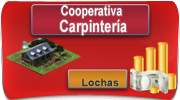
<style>
.page{position:relative;width:180px;height:100px}
.page>*{position:absolute;margin:0}
.t1{font:13.9px/16.7px "Arial-BoldMT";color:#ffffff;scale:0.77 1}
.t2{font:16.7px/16.7px "Arial-BoldMT";color:#ffffff;scale:0.77 1}
.t3{font:10.4px "Arial-BoldMT";color:#303030;scale:1.03 1}
.t4{font:20.8px "Arial-BoldMT";color:#303030;scale:1.03 1}
</style>
<div class="page">
<p class="t1" style="left:60px;top:5px;width:67px;height:31px">Cooperativa<br><span class="t2">        Carpintería</span></p>
<p class="t3" style="left:82px;top:78px;width:37px;height:9px"><span class="t4"><br></span>Lochas</p>
</div>
